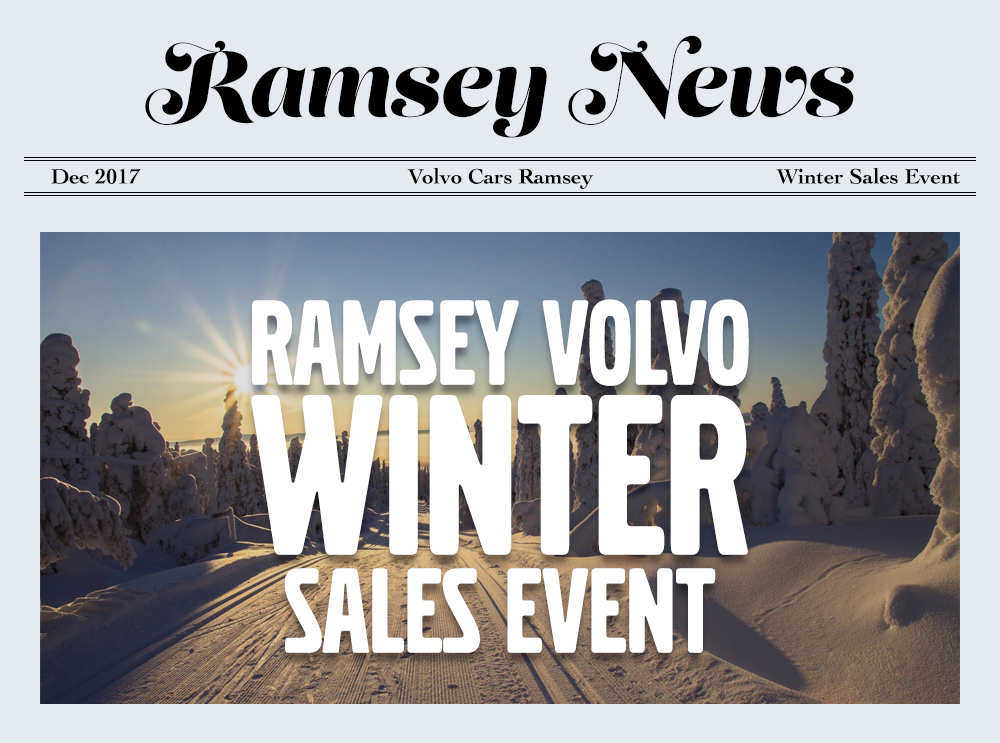
<style>
.page{position:relative;width:1000px;height:743px;background:#e4eaf0}
.page>*{position:absolute;margin:0}
.t1{font:93.3px "LustScript";color:#000000}
.t2{font:21.9px "Cochin-Bold";color:#000000}
.t3{font:126.3px/98px "VolvoBroad";color:#ffffff}
.t4{font:239.3px/170px "VolvoBroad";color:#ffffff}
</style>
<div class="page">
<p class="t1" style="left:145px;top:35px;width:709px;height:103px">Ramsey News</p>
<p class="t2" style="left:51px;top:168px;width:90px;height:16px">Dec 2017</p>
<p class="t2" style="left:407px;top:167px;width:187px;height:22px">Volvo Cars Ramsey</p>
<p class="t2" style="left:776px;top:167px;width:185px;height:17px">Winter Sales Event</p>
<p class="t3" style="left:251px;top:299px;width:498px;height:354px;text-align:center">RAMSEY VOLVO<br><span class="t4">WINTER<br></span>SALES EVENT</p>
</div>
